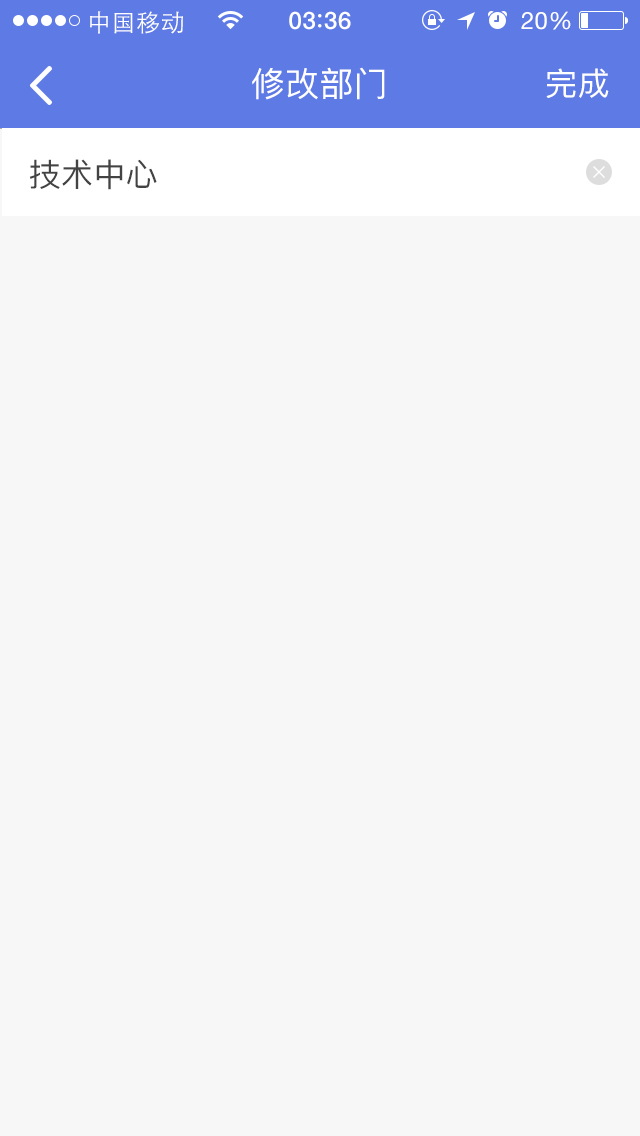
<style>
.page{position:relative;width:640px;height:1136px;background:#f7f7f7}
.page>*{position:absolute;margin:0}
.t1{font:24px "STHeitiSC-Light";letter-spacing:0.02em;color:#ffffff}
.t2{font:24px "HelveticaNeue-Medium";letter-spacing:0.03em;color:#ffffff}
.t3{font:24px "HelveticaNeue";letter-spacing:0.02em;color:#ffffff}
.t4{font:34px "PingFangSC-Regular";letter-spacing:0.01em;color:#ffffff}
.t5{font:32px "PingFangSC-Regular";letter-spacing:0.01em;color:#ffffff}
.t6{font:32px "PingFangSC-Regular";letter-spacing:0.01em;color:#434343}
</style>
<div class="page">
<p class="t1" style="left:90px;top:11px;width:93px;height:23px">中国移动</p>
<p class="t2" style="left:289px;top:11px;width:62px;height:19px">03 36</p>
<p class="t3" style="left:521px;top:11px;width:50px;height:19px">20%</p>
<p class="t4" style="left:252px;top:67px;width:133px;height:33px">修改部门</p>
<p class="t5" style="left:546px;top:68px;width:63px;height:30px">完成</p>
<p class="t6" style="left:29px;top:159px;width:128px;height:31px">技术中心</p>
</div>
